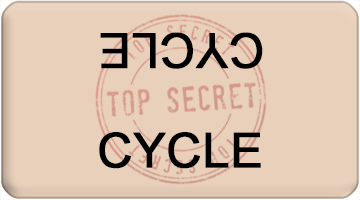
<style>
.page{position:relative;width:360px;height:200px;background:#e8d0bb}
.page>*{position:absolute;margin:0}
.t1{font:48px "ArialMT";color:#000000;font-weight:bold}
</style>
<div class="page">
<p class="t1" style="left:100px;top:32px;width:163px;height:37px;rotate:180deg">CYCLE</p>
<p class="t1" style="left:99px;top:132px;width:162px;height:37px">CYCLE</p>
</div>
